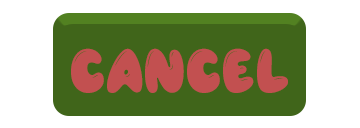
<style>
.page{position:relative;width:360px;height:128px;background:#ffffff}
.page>*{position:absolute;margin:0}
.t1{font:63.3px "Airfool";color:#c25050}
</style>
<div class="page">
<p class="t1" style="left:71px;top:48px;width:217px;height:45px">cancel</p>
</div>
